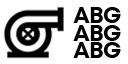
<style>
.page{position:relative;width:128px;height:64px;background:#ffffff}
.page>*{position:absolute;margin:0}
.t1{font:22.7px "Mont-Bold";letter-spacing:-0.02em;color:#000000}
</style>
<div class="page">
<p class="t1" style="left:73px;top:7px;width:48px;height:16px">ABG</p>
<p class="t1" style="left:73px;top:25px;width:48px;height:16px">ABG</p>
<p class="t1" style="left:73px;top:42px;width:48px;height:16px">ABG</p>
</div>
